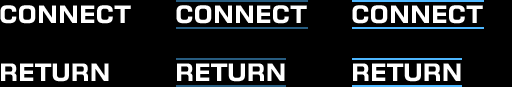
<style>
.page{position:relative;width:512px;height:87px;background:#000000}
.page>*{position:absolute;margin:0}
.t1{font:24px "Moire-Bold";color:#ffffff}
</style>
<div class="page">
<p class="t1" style="left:0px;top:5px;width:131px;height:77px">CONNECT<br><br>RETURN</p>
<p class="t1" style="left:176px;top:5px;width:131px;height:77px">CONNECT<br><br>RETURN</p>
<p class="t1" style="left:352px;top:5px;width:131px;height:77px">CONNECT<br><br>RETURN</p>
</div>
